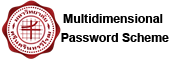
<style>
.page{position:relative;width:170px;height:61px;background:#ffffff}
.page>*{position:absolute;margin:0}
.t1{font:18.8px "BrowalliaUPC-Bold";color:#000000}
</style>
<div class="page">
<p class="t1" style="left:63px;top:14px;width:100px;height:9px">Multidimensional</p>
<p class="t1" style="left:61px;top:33px;width:108px;height:9px">Password Scheme</p>
</div>
